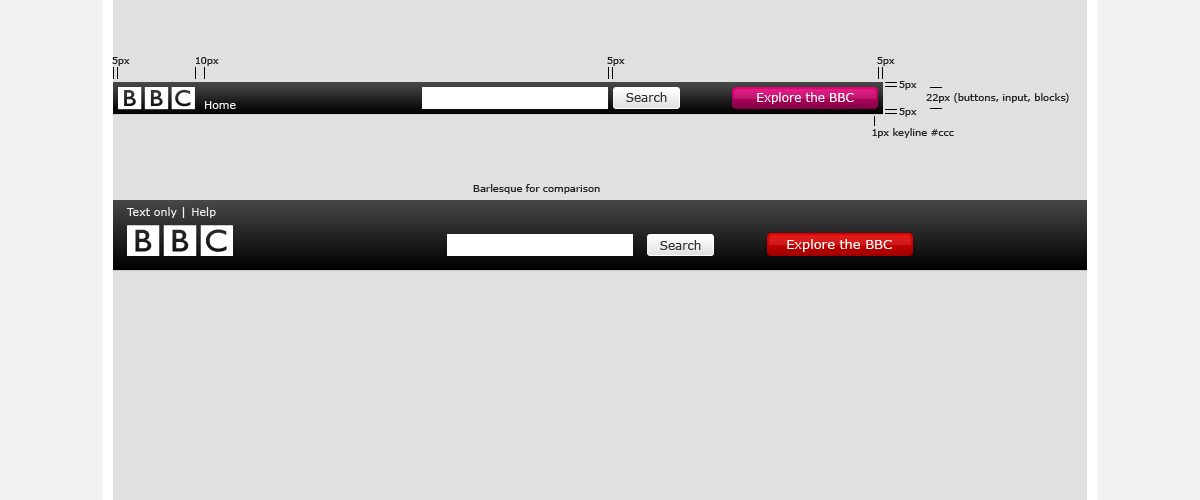
<style>
.page{position:relative;width:1200px;height:500px;background:#e0e0e0}
.page>*{position:absolute;margin:0}
.t1{font:10px "Verdana";letter-spacing:-0.01em;color:#242424}
.t2{font:11px "Verdana";color:#f1f1f1}
.t3{font:12px "Verdana";color:#333333}
.t4{font:12px "Verdana";color:#ffffff}
.t5{font:13px "Verdana";color:#ffffff}
</style>
<div class="page">
<p class="t1" style="left:112px;top:57px;width:18px;height:9px">5px</p>
<p class="t1" style="left:196px;top:57px;width:23px;height:9px">10px</p>
<p class="t1" style="left:607px;top:57px;width:18px;height:9px">5px</p>
<p class="t1" style="left:877px;top:57px;width:18px;height:9px">5px</p>
<p class="t1" style="left:899px;top:81px;width:18px;height:9px">5px</p>
<p class="t2" style="left:205px;top:101px;width:31px;height:8px">Home</p>
<p class="t3" style="left:626px;top:92px;width:41px;height:10px">Search</p>
<p class="t4" style="left:757px;top:92px;width:97px;height:12px">Explore the BBC</p>
<p class="t1" style="left:926px;top:93px;width:143px;height:10px">22px (buttons, input, blocks)</p>
<p class="t1" style="left:899px;top:108px;width:18px;height:9px">5px</p>
<p class="t1" style="left:872px;top:128px;width:82px;height:10px">1px keyline #ccc</p>
<p class="t1" style="left:473px;top:184px;width:127px;height:10px">Barlesque for comparison</p>
<p class="t2" style="left:126px;top:207px;width:90px;height:11px">Text only | Help</p>
<p class="t3" style="left:660px;top:240px;width:41px;height:10px">Search</p>
<p class="t5" style="left:787px;top:239px;width:105px;height:13px">Explore the BBC</p>
</div>
